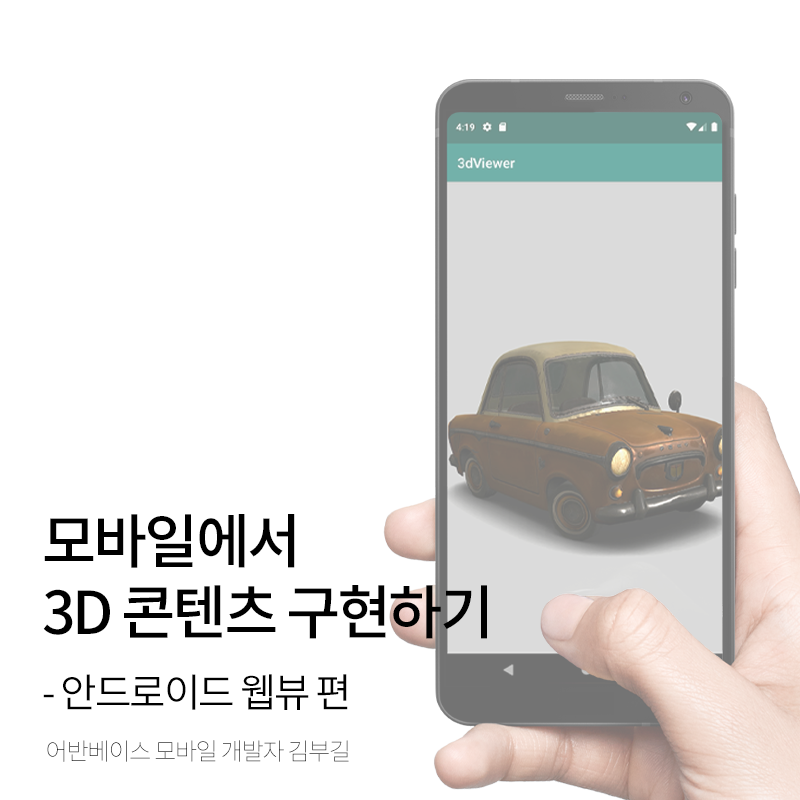
<style>
.page{position:relative;width:800px;height:800px;background:#ffffff}
.page>*{position:absolute;margin:0}
.t1{font:59.1px/70.8px "NotoSansCJKkr-Medium";letter-spacing:-0.05em;color:#000000}
.t2{font:39.7px/73.8px "NotoSansCJKkr-DemiLight";letter-spacing:-0.05em;color:#000000}
.t3{font:24px "NotoSansCJKkr-Thin";letter-spacing:-0.05em;text-transform:uppercase}
</style>
<div class="page">
<p class="t1" style="left:43px;top:514px;width:444px;height:196px">모바일에서 <br>3D 콘텐츠 구현하기<br><span class="t2">- 안드로이드 웹뷰 편</span></p>
<p class="t3" style="left:47px;top:740px;width:302px;height:22px">어반베이스 모바일 개발자 김부길</p>
</div>
